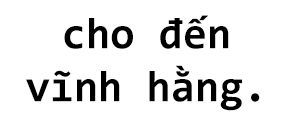
<style>
.page{position:relative;width:288px;height:120px;background:#ffffff}
.page>*{position:absolute;margin:0}
.t1{font:44px "Consolas-Bold";color:#000000}
</style>
<div class="page">
<p class="t1" style="left:26px;top:15px;width:234px;height:96px;text-align:center">cho đến vĩnh hằng.</p>
</div>
